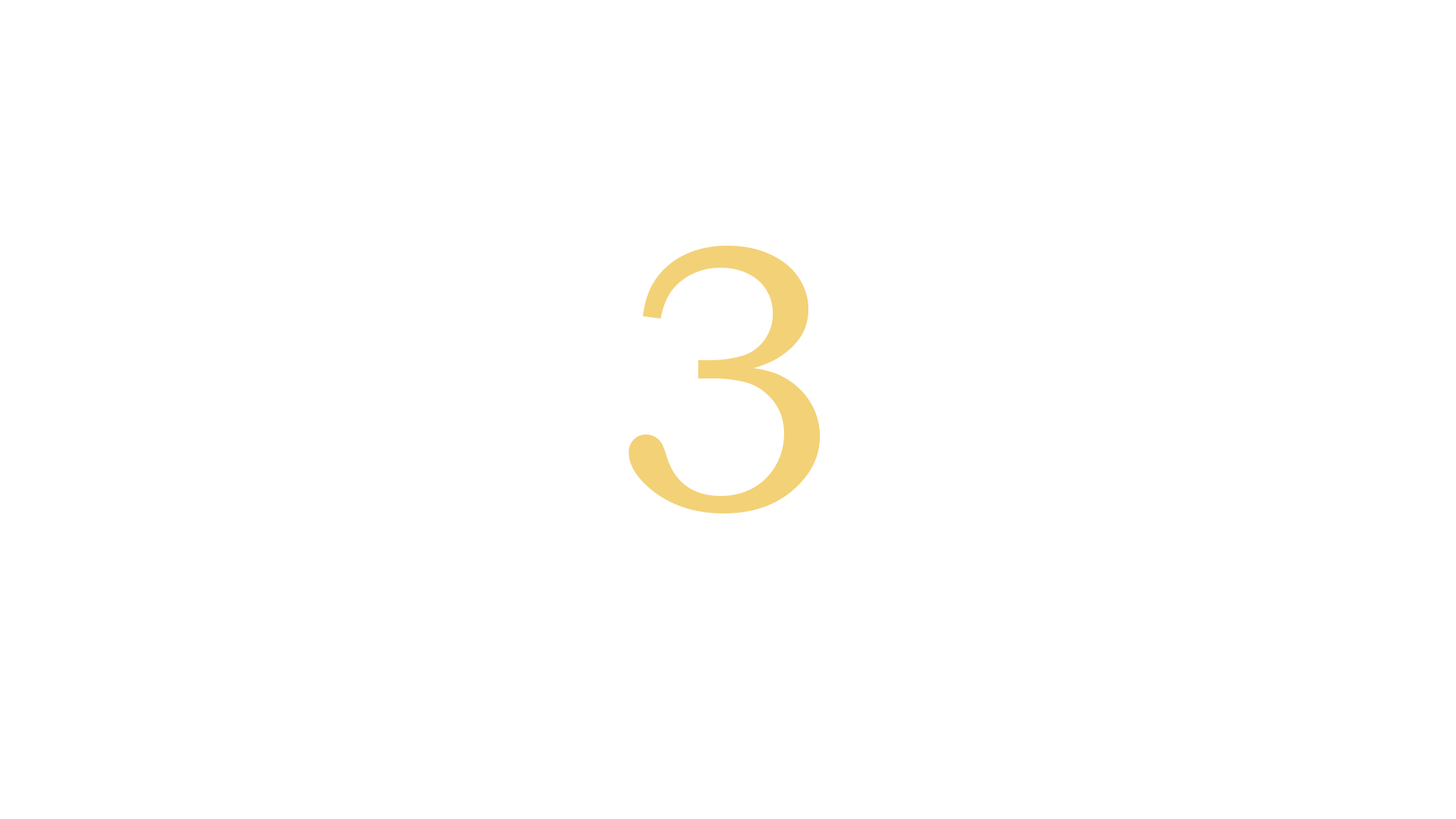
<style>
.page{position:relative;width:1456px;height:819px;background:#ffffff}
.page>*{position:absolute;margin:0}
.t1{font:379.2px "BookmanOldStyle";color:#f3d176}
</style>
<div class="page">
<p class="t1" style="left:629px;top:246px;width:192px;height:267px">3</p>
</div>
